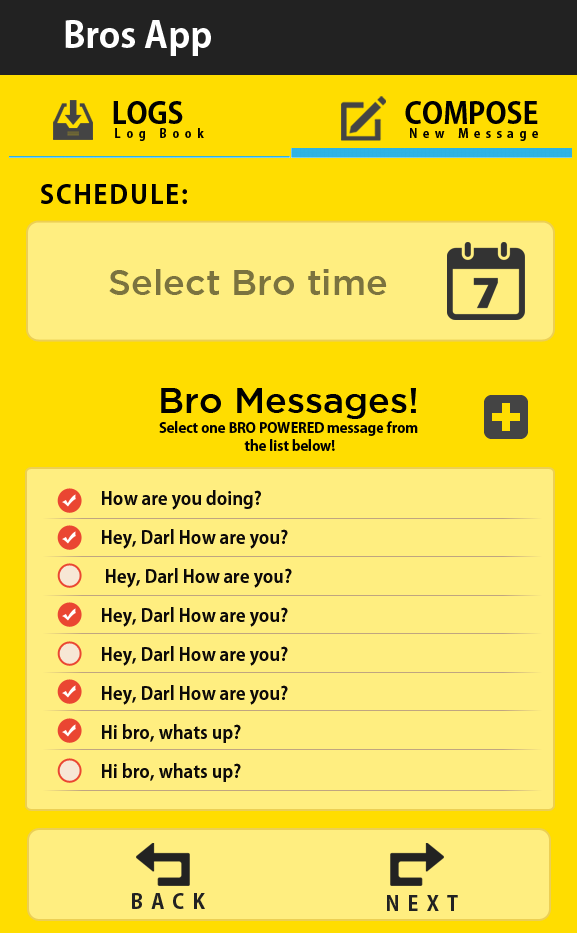
<style>
.page{position:relative;width:577px;height:933px;background:#ffee80}
.page>*{position:absolute;margin:0}
.t1{font:36px "AdobeGothicStd-Bold";color:#ffffff}
.t2{font:29px "AdobeGothicStd-Bold";color:#000000}
.t3{font:12px "AdobeGothicStd-Bold";letter-spacing:0.45em;color:#000000}
.t4{font:26px "AdobeGothicStd-Bold";letter-spacing:0.07em;color:#000000}
.t5{font:36px "GothamMedium";color:#7b733f}
.t6{font:36px "GothamMedium";color:#000000}
.t7{font:14px/18px "AdobeGothicStd-Bold";color:#000000}
.t8{font:18px/39px "AdobeGothicStd-Bold";color:#0c0908}
.t9{font:20px "AdobeGothicStd-Bold";letter-spacing:0.4em;color:#222222}
</style>
<div class="page">
<p class="t1" style="left:65px;top:20px;width:146px;height:36px">Bros App</p>
<p class="t2" style="left:113px;top:101px;width:70px;height:23px">LOGS</p>
<p class="t2" style="left:405px;top:101px;width:133px;height:23px">COMPOSE</p>
<p class="t3" style="left:115px;top:128px;width:89px;height:13px">Log Book</p>
<p class="t3" style="left:410px;top:128px;width:128px;height:13px">New Message</p>
<p class="t4" style="left:41px;top:184px;width:146px;height:20px">SCHEDULE:</p>
<p class="t5" style="left:109px;top:269px;width:278px;height:26px">Select Bro time</p>
<p class="t6" style="left:161px;top:388px;width:255px;height:31px">Bro Messages!</p>
<p class="t7" style="left:159px;top:421px;width:259px;height:30px;text-align:center">Select one BRO POWERED message from<br> the list below!</p>
<p class="t8" style="left:102px;top:490px;width:190px;height:292px">How are you doing?<br>Hey, Darl How are you?<br> Hey, Darl How are you?<br>Hey, Darl How are you?<br>Hey, Darl How are you?<br>Hey, Darl How are you?<br>Hi bro, whats up?<br>Hi bro, whats up?</p>
<p class="t9" style="left:132px;top:893px;width:73px;height:16px">BACK</p>
<p class="t9" style="left:387px;top:895px;width:71px;height:16px">NEXT</p>
</div>
